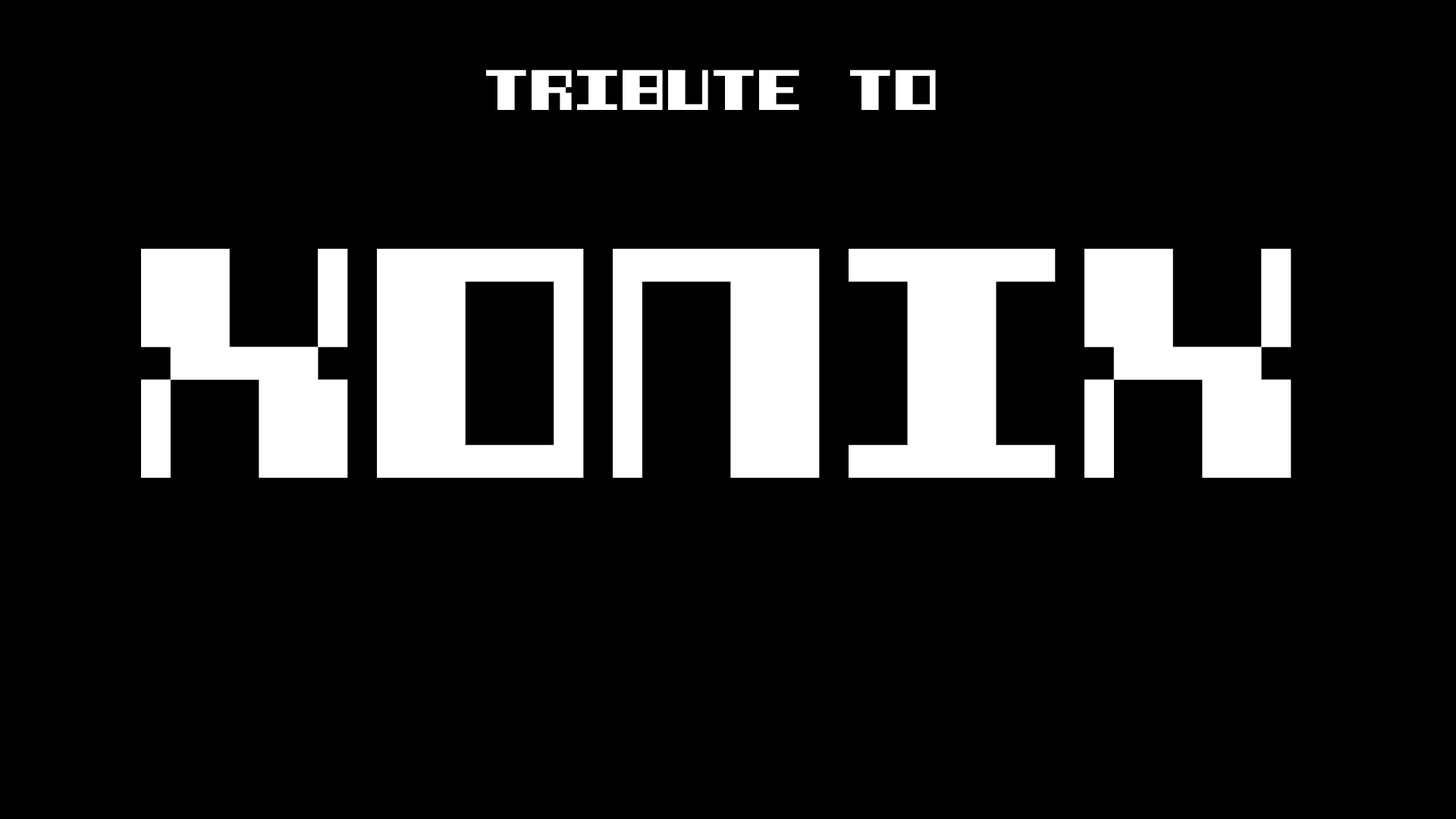
<style>
.page{position:relative;width:1456px;height:819px;background:#000000}
.page>*{position:absolute;margin:0}
.t1{font:45.5px "Qix-(large)";color:#ffffff}
.t2{font:261.6px "Qix-(large)";color:#ffffff;scale:0.9 1}
</style>
<div class="page">
<p class="t1" style="left:486px;top:70px;width:450px;height:40px">tribute to</p>
<p class="t2" style="left:141px;top:249px;width:1150px;height:229px">XONIX</p>
</div>
